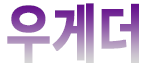
<style>
.page{position:relative;width:150px;height:70px;background:#ffffff}
.page>*{position:absolute;margin:0}
.t1{font:64px "NotoSansKR-Bold";letter-spacing:-0.025em;font-weight:bold;scale:0.77 1}
</style>
<div class="page">
<p class="t1" style="left:7px;top:3px;width:132px;height:60px">우게더</p>
</div>
